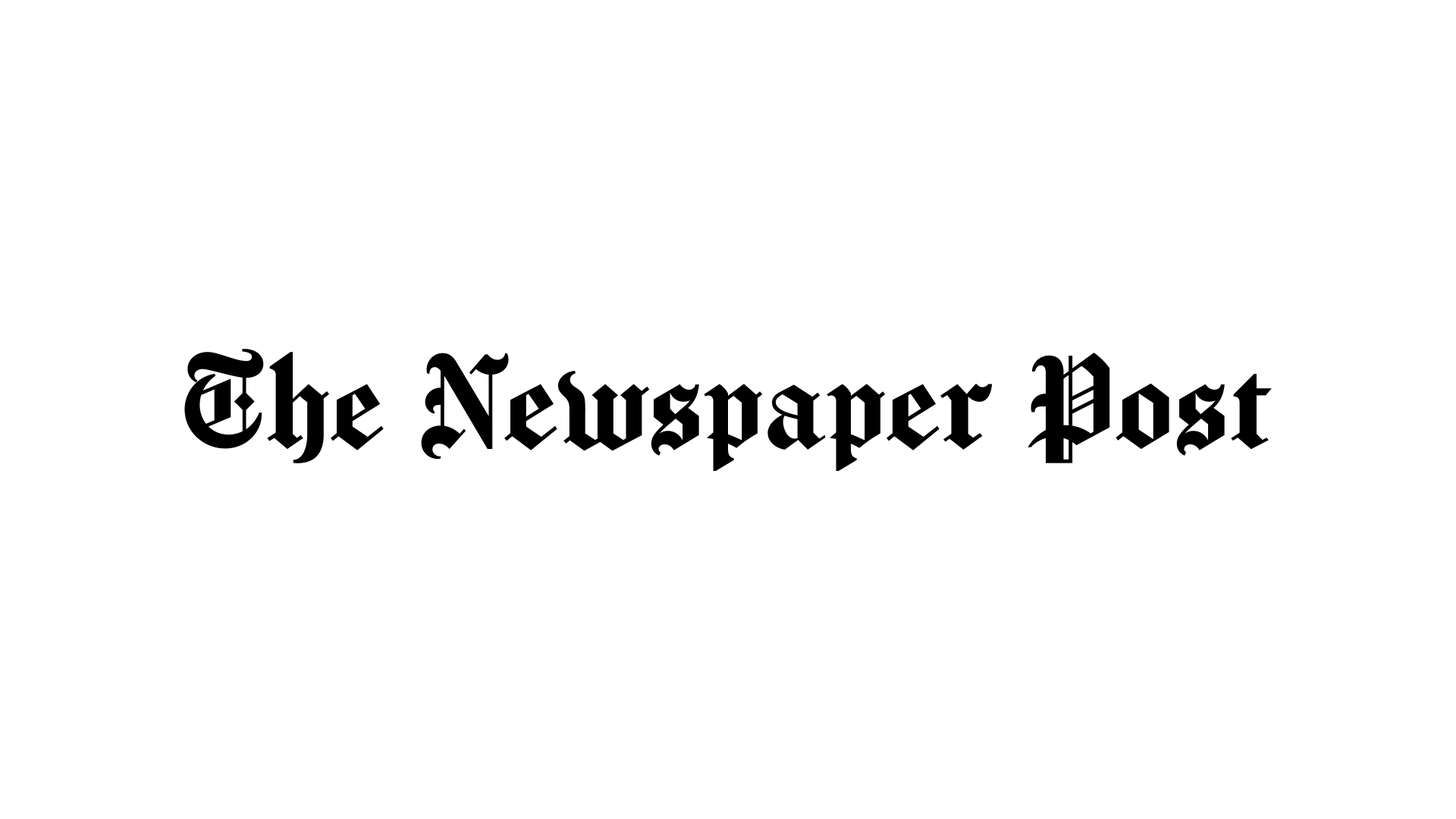
<style>
.page{position:relative;width:1456px;height:819px;background:#ffffff}
.page>*{position:absolute;margin:0}
.t1{font:151.7px "Chomsky";color:#000000}
</style>
<div class="page">
<p class="t1" style="left:184px;top:349px;width:1088px;height:123px">The Newspaper Post</p>
</div>
